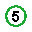
<style>
.page{position:relative;width:32px;height:32px;background:#ffffff}
.page>*{position:absolute;margin:0}
.t1{font:14px "Arial-BoldMT";color:#000000}
</style>
<div class="page">
<p class="t1" style="left:12px;top:11px;width:7px;height:11px">5</p>
</div>
